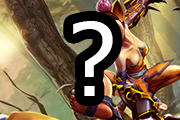
<style>
.page{position:relative;width:180px;height:120px}
.page>*{position:absolute;margin:0}
.t1{font:100px "Tahoma";color:#ffffff}
</style>
<div class="page">
<p class="t1" style="left:73px;top:21px;width:40px;height:75px">?</p>
</div>
